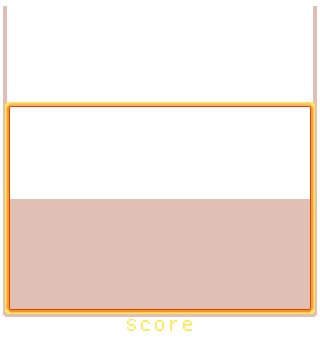
<style>
.page{position:relative;width:320px;height:340px;background:#ffffff}
.page>*{position:absolute;margin:0}
.t1{font:14px "Dogica";color:#fbe95b}
</style>
<div class="page">
<p class="t1" style="left:127px;top:319px;width:65px;height:12px">Score</p>
</div>
